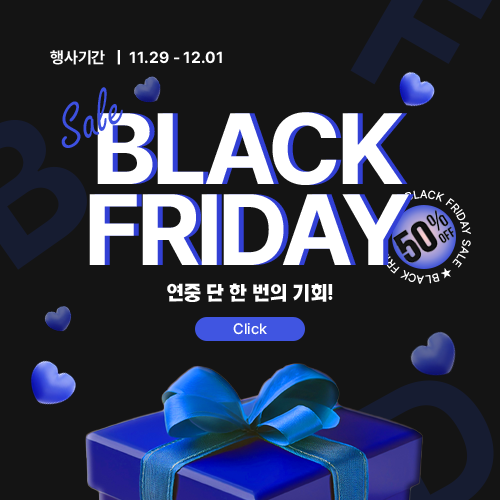
<style>
.page{position:relative;width:500px;height:500px;background:#141414}
.page>*{position:absolute;margin:0}
.t1{font:16px "Pretendard-Bold";color:#ffffff}
.t2{font:62.1px "FreestyleScript-Regular";color:#3d50e0}
.t3{font:100px/81px "Pretendard-Bold";letter-spacing:-0.04em;color:#ffffff}
.t4{font:11.2px "Pretendard-Regular";letter-spacing:0.075em;color:#ffffff}
.t5{font:18px "KOTRA_BOLD-Bold";color:#ffffff}
.t6{font:15px "Pretendard-Medium";color:#ffffff}
</style>
<div class="page">
<p class="t1" style="left:50px;top:50px;width:172px;height:15px">행사기간   |  11.29 - 12.01</p>
<p class="t2" style="left:61px;top:87px;width:62px;height:61px;rotate:-27deg">Sale</p>
<p class="t3" style="left:89px;top:112px;width:320px;height:153px;text-align:center">BLACK<br>FRIDAY</p>
<p class="t3" style="left:94px;top:112px;width:320px;height:153px;text-align:center">BLACK<br>FRIDAY</p>
<p class="t4" style="left:376px;top:190px;width:95px;height:94px;rotate:102deg">BLACK FRIDAY SALE ★ BLACK FRIDAY SALE ★</p>
<p class="t5" style="left:167px;top:283px;width:166px;height:19px">연중 단 한 번의 기회!</p>
<p class="t6" style="left:233px;top:323px;width:34px;height:12px">Click</p>
</div>
